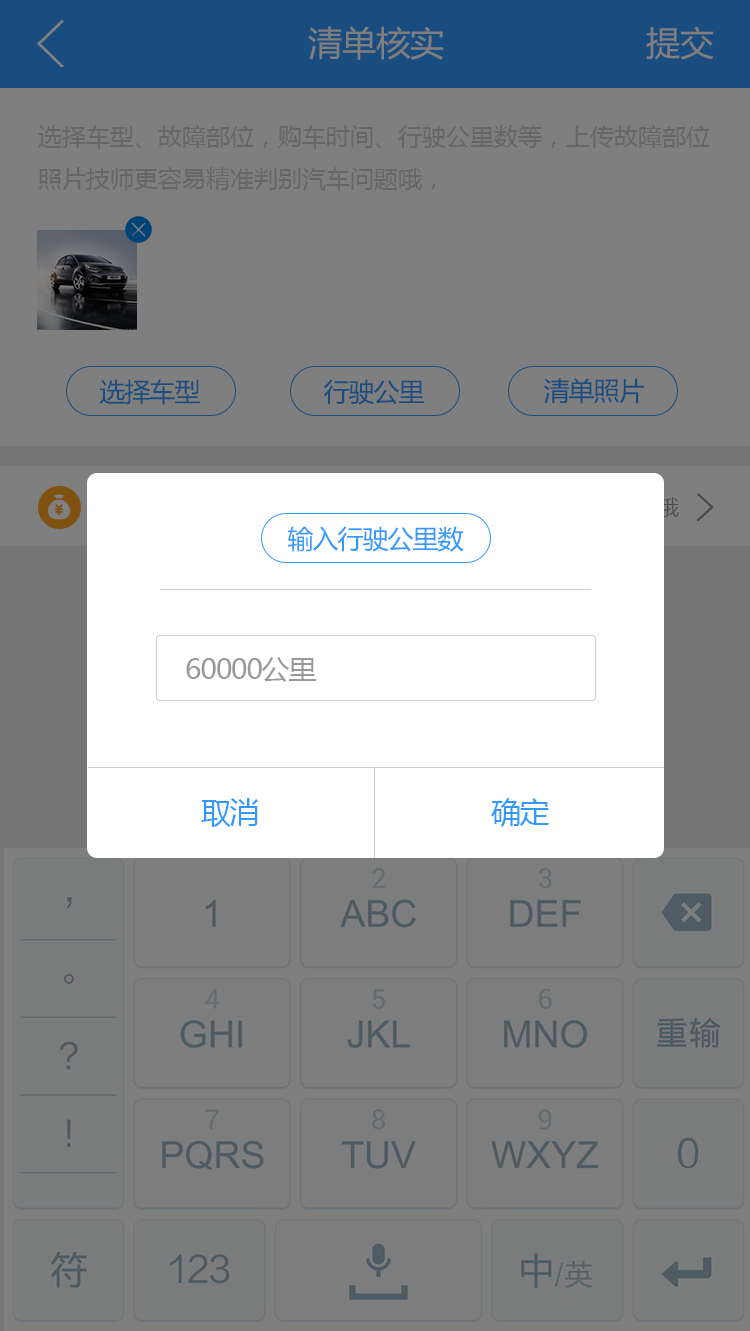
<style>
.page{position:relative;width:750px;height:1331px;background:#7f7f7f}
.page>*{position:absolute;margin:0}
.t1{font:34px "MicrosoftYaHei";color:#7f7f7f}
.t2{font:24px "MicrosoftYaHei";color:#666666}
.t3{font:26px "MicrosoftYaHei";letter-spacing:-0.04em;color:#194c7f}
.t4{font:26px "MicrosoftYaHei";letter-spacing:-0.04em;color:#3399ff}
.t5{font:28px "MicrosoftYaHei";letter-spacing:-0.04em;color:#999999}
.t6{font:30px "MicrosoftYaHei";letter-spacing:-0.04em;color:#3399ff}
</style>
<div class="page">
<p class="t1" style="left:308px;top:26px;width:136px;height:34px">清单核实</p>
<p class="t1" style="left:646px;top:26px;width:68px;height:34px">提交</p>
<p class="t2" style="left:38px;top:125px;width:672px;height:66px">选择车型、故障部位，购车时间、行驶公里数等，上传故障部位照片技师更容易精准判别汽车问题哦，</p>
<p class="t3" style="left:99px;top:379px;width:101px;height:26px">选择车型</p>
<p class="t3" style="left:324px;top:379px;width:101px;height:26px">行驶公里</p>
<p class="t3" style="left:544px;top:378px;width:100px;height:26px">清单照片</p>
<p class="t4" style="left:288px;top:526px;width:176px;height:26px">输入行驶公里数</p>
<p class="t5" style="left:186px;top:657px;width:131px;height:25px">60000公里</p>
<p class="t6" style="left:201px;top:798px;width:57px;height:29px">取消</p>
<p class="t6" style="left:491px;top:798px;width:58px;height:29px">确定</p>
</div>
